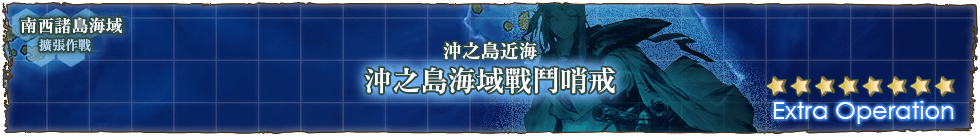
<style>
.page{position:relative;width:980px;height:136px}
.page>*{position:absolute;margin:0}
.t1{font:17px/22px "RyuminPr6N-ExBold";color:#ffffff}
.t2{font:13px/22px "RyuminPr6N-ExBold";color:#b9d7f5}
.t3{font:19px "RyuminPro-ExBold";color:#ffffff}
.t4{font:28px "RyuminPro-ExBold";color:#ffffff}
</style>
<div class="page">
<p class="t1" style="left:20px;top:17px;width:102px;height:35px">南西諸島海域  <br>　　　<span class="t2">擴張作戰</span></p>
<p class="t3" style="left:443px;top:42px;width:94px;height:18px">沖之島近海</p>
<p class="t4" style="left:365px;top:67px;width:250px;height:27px">沖之島海域戰鬥哨戒</p>
</div>
